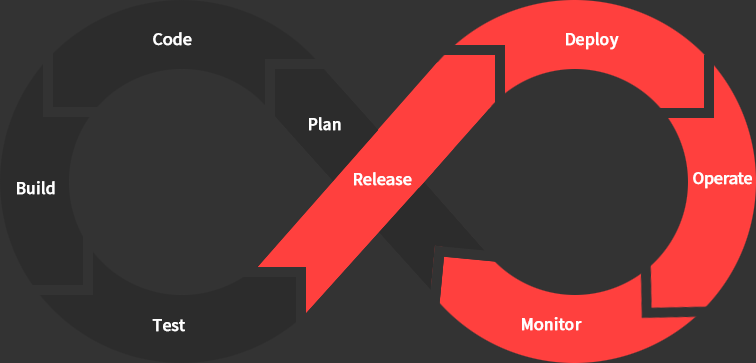
<style>
.page{position:relative;width:756px;height:363px;background:#333333}
.page>*{position:absolute;margin:0}
.t1{font:16px "NotoSansCJKkr-Medium";letter-spacing:-0.025em;color:#ffffff;font-weight:bold}
.t2{font:16px "NotoSansCJKkr-Medium";letter-spacing:-0.05em;color:#ffffff;font-weight:bold}
</style>
<div class="page">
<p class="t1" style="left:153px;top:32px;width:39px;height:14px">Code</p>
<p class="t1" style="left:566px;top:32px;width:53px;height:18px">Deploy</p>
<p class="t1" style="left:309px;top:117px;width:32px;height:14px">Plan</p>
<p class="t1" style="left:354px;top:172px;width:58px;height:14px">Release</p>
<p class="t2" style="left:693px;top:172px;width:59px;height:17px">Operate</p>
<p class="t1" style="left:17px;top:181px;width:38px;height:14px">Build</p>
<p class="t1" style="left:522px;top:317px;width:60px;height:14px">Monitor</p>
<p class="t1" style="left:152px;top:319px;width:33px;height:13px">Test</p>
</div>
